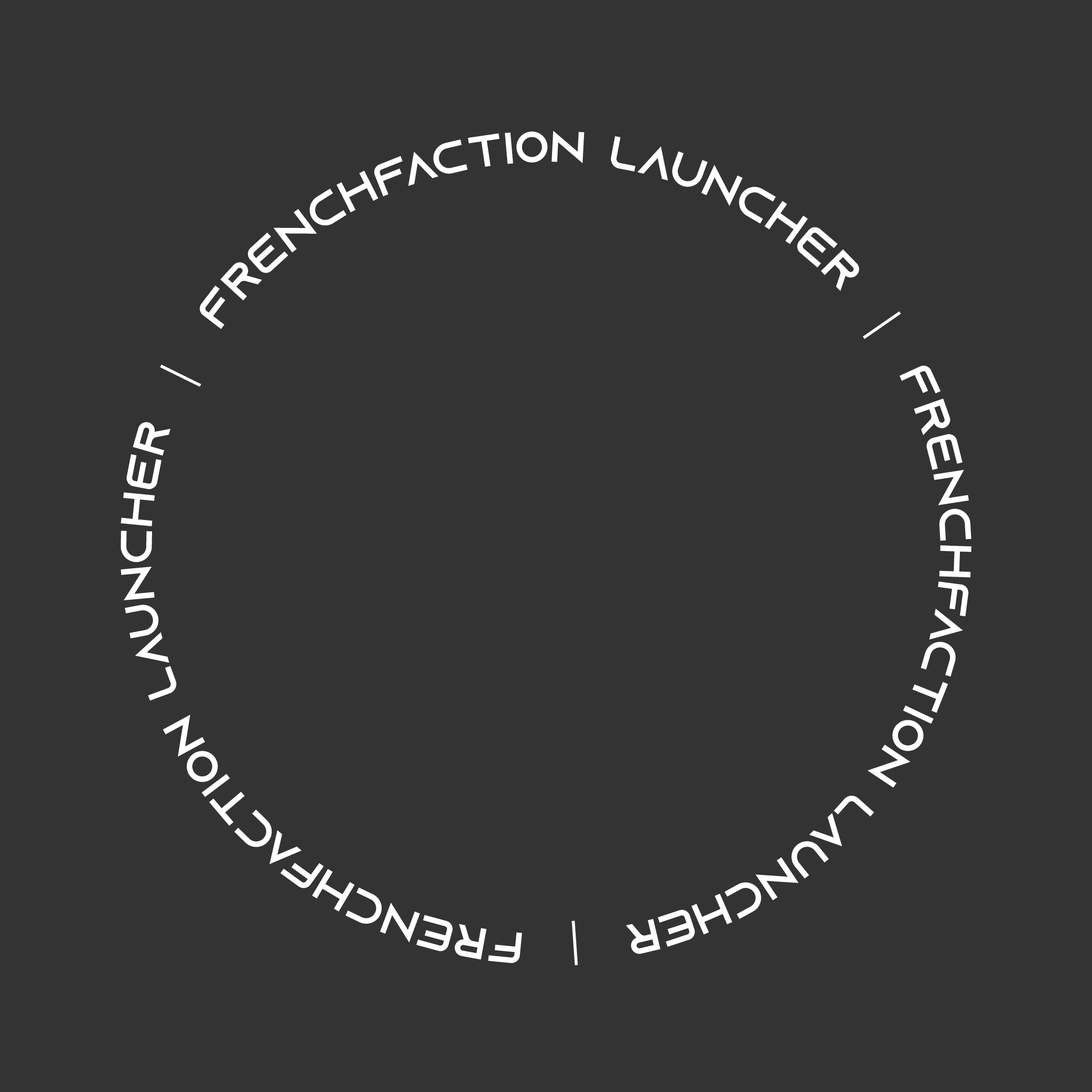
<style>
.page{position:relative;width:1092px;height:1092px;background:#333333}
.page>*{position:absolute;margin:0}
.t1{font:44.3px "AzonixRegular";letter-spacing:0.01em;color:#ffffff}
.t2{font:44.3px "MyriadPro-Regular";letter-spacing:0.01em;color:#ffffff}
</style>
<div class="page">
<p class="t1" style="left:121px;top:131px;width:850px;height:834px">FRENCHFACTION LAUNCHER  <span class="t2">|</span>  FRENCHFACTION LAUNCHER  <span class="t2">|</span>  FRENCHFACTION LAUNCHER  <span class="t2">|</span></p>
</div>
